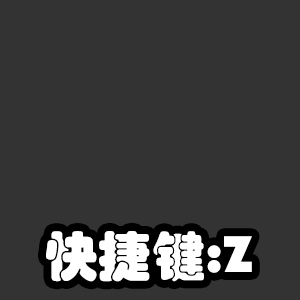
<style>
.page{position:relative;width:300px;height:300px;background:#333333}
.page>*{position:absolute;margin:0}
.t1{font:53.2px "STHupo";color:#ffffff}
</style>
<div class="page">
<p class="t1" style="left:46px;top:231px;width:206px;height:51px">快捷键:Z</p>
</div>
